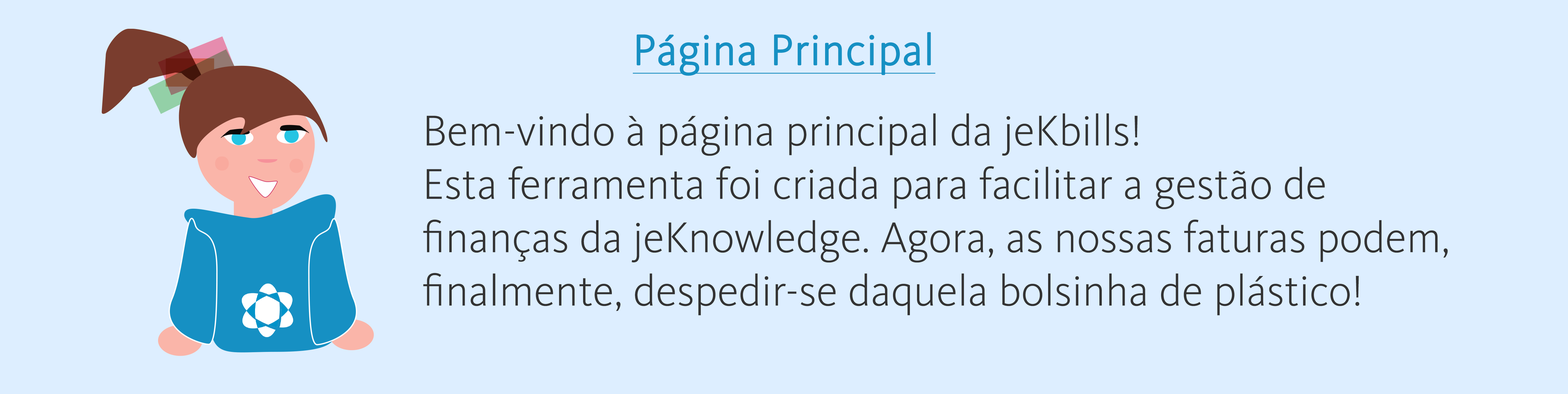
<style>
.page{position:relative;width:1568px;height:394px;background:#ddeeff}
.page>*{position:absolute;margin:0}
.t1{font:44.5px "KievitOT-Light";color:#1690c3;font-weight:bold;text-decoration:underline}
.t2{font:44.5px "KievitOT-Light";color:#333333}
</style>
<div class="page">
<p class="t1" style="left:633px;top:32px;width:302px;height:44px">Página Principal</p>
<p class="t2" style="left:423px;top:113px;width:1025px;height:203px">Bem-vindo à página principal da jeKbills!<br>Esta ferramenta foi criada para facilitar a gestão de <br>finanças da jeKnowledge. Agora, as nossas faturas podem,<br>finalmente, despedir-se daquela bolsinha de plástico!</p>
</div>
